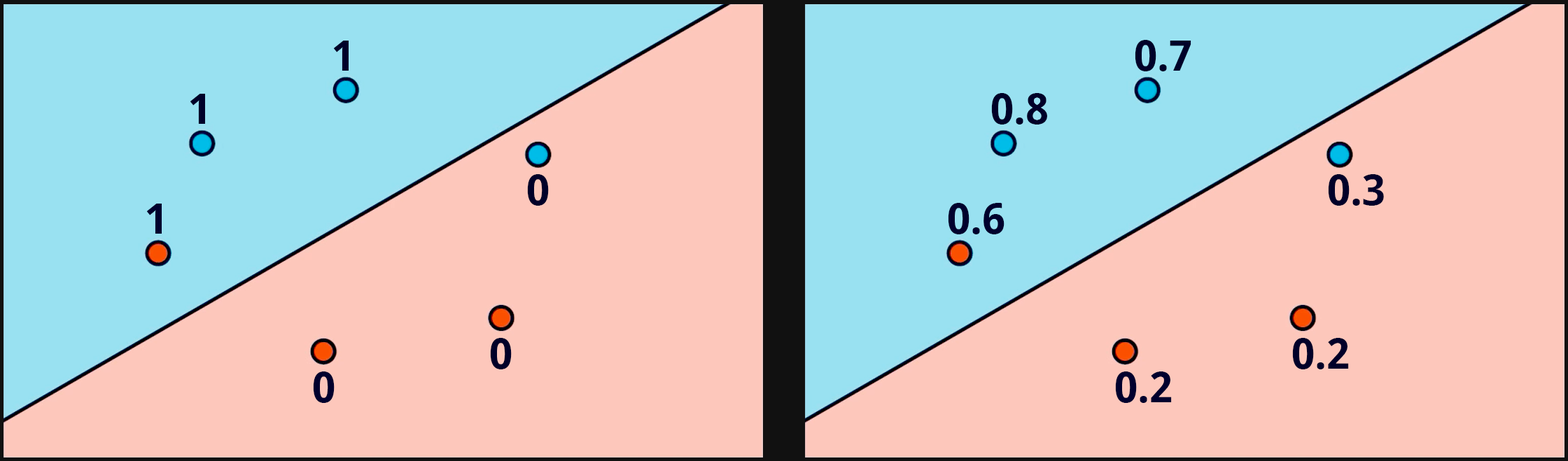
<style>
.page{position:relative;width:1568px;height:461px;background:#fdc7bb}
.page>*{position:absolute;margin:0}
.t1{font:42px "DroidSans-Bold";color:#000029}
.t2{font:42px "DroidSans-Bold";color:#00002e}
</style>
<div class="page">
<p class="t1" style="left:333px;top:41px;width:16px;height:30px">1</p>
<p class="t1" style="left:1135px;top:40px;width:56px;height:31px">0.7</p>
<p class="t1" style="left:190px;top:94px;width:15px;height:30px">1</p>
<p class="t1" style="left:991px;top:93px;width:56px;height:32px">0.8</p>
<p class="t1" style="left:527px;top:174px;width:22px;height:32px">0</p>
<p class="t1" style="left:1328px;top:174px;width:56px;height:32px">0.3</p>
<p class="t2" style="left:146px;top:204px;width:16px;height:30px">1</p>
<p class="t2" style="left:948px;top:203px;width:56px;height:31px">0.6</p>
<p class="t1" style="left:490px;top:338px;width:22px;height:32px">0</p>
<p class="t1" style="left:1292px;top:338px;width:57px;height:32px">0.2</p>
<p class="t2" style="left:313px;top:372px;width:22px;height:31px">0</p>
<p class="t2" style="left:1115px;top:372px;width:57px;height:31px">0.2</p>
</div>
